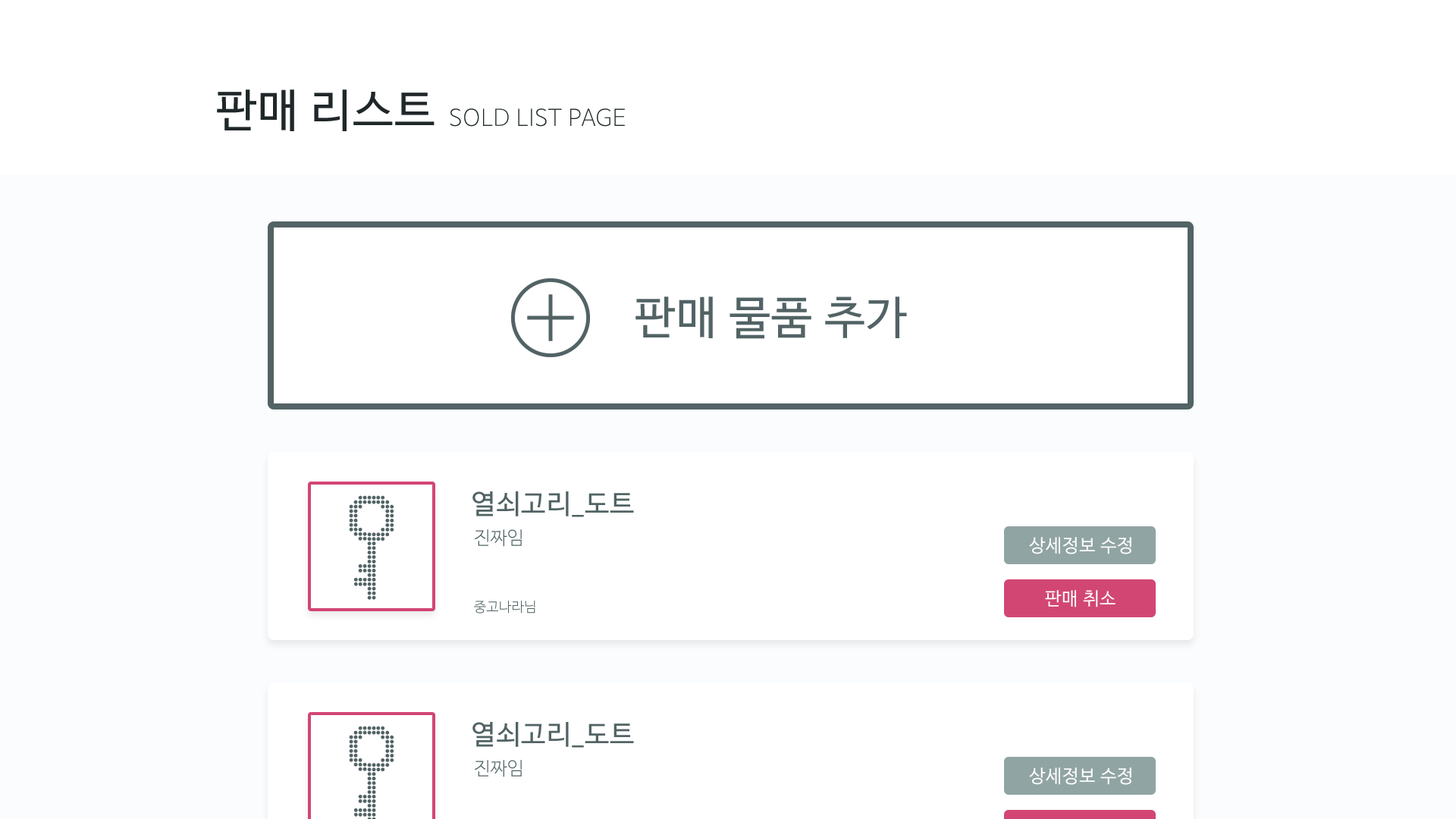
<style>
.page{position:relative;width:1456px;height:819px;background:#ffffff}
.page>*{position:absolute;margin:0}
.t1{font:45.5px "NanumBarunGothic";letter-spacing:0.025em;color:#202728}
.t2{font:22.7px "NanumBarunGothicUltraLight";letter-spacing:0.025em;color:#202728}
.t3{font:45.5px "NanumBarunGothic";letter-spacing:0.025em;color:#526364}
.t4{font:27.3px "NanumBarunGothic";letter-spacing:0.025em;color:#526364}
.t5{font:18.2px "NanumBarunGothicLight";letter-spacing:0.025em;color:#526364}
.t6{font:18.2px "NanumBarunGothic";letter-spacing:0.025em;color:#ffffff}
.t7{font:13.6px "NanumBarunGothicLight";letter-spacing:0.025em;color:#526364}
</style>
<div class="page">
<p class="t1" style="left:217px;top:89px;width:218px;height:42px">판매 리스트</p>
<p class="t2" style="left:450px;top:108px;width:175px;height:19px">SOLD LIST PAGE</p>
<p class="t3" style="left:635px;top:297px;width:272px;height:42px">판매 물품 추가</p>
<p class="t4" style="left:472px;top:491px;width:162px;height:26px">열쇠고리_도트</p>
<p class="t5" style="left:474px;top:529px;width:48px;height:18px">진짜임</p>
<p class="t6" style="left:1029px;top:537px;width:102px;height:17px">상세정보 수정</p>
<p class="t6" style="left:1045px;top:590px;width:70px;height:17px">판매 취소</p>
<p class="t7" style="left:474px;top:601px;width:61px;height:12px">중고나라님</p>
<p class="t4" style="left:472px;top:722px;width:162px;height:26px">열쇠고리_도트</p>
<p class="t5" style="left:474px;top:760px;width:48px;height:17px">진짜임</p>
<p class="t6" style="left:1029px;top:767px;width:102px;height:18px">상세정보 수정</p>
</div>
